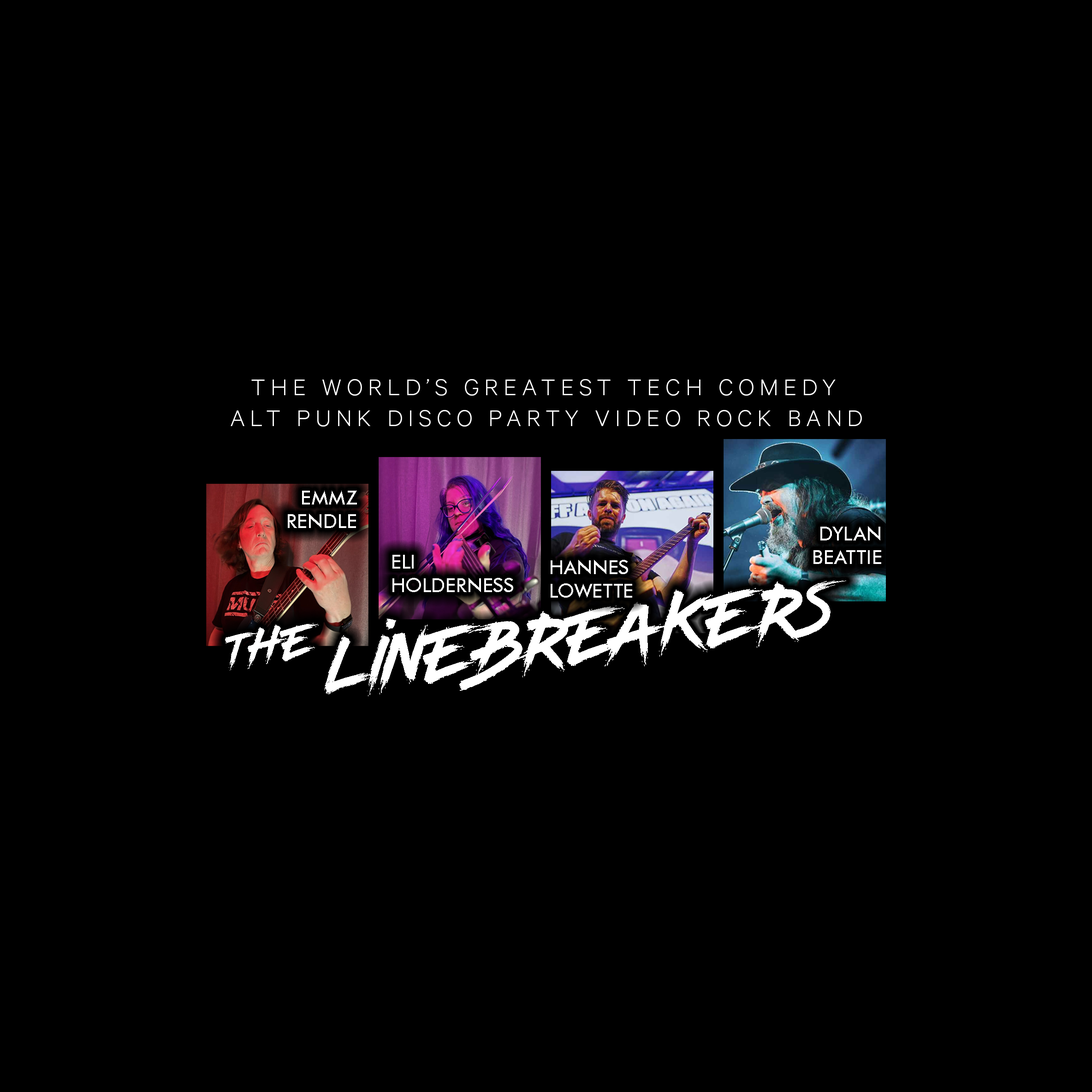
<style>
.page{position:relative;width:1092px;height:1092px;background:#000000}
.page>*{position:absolute;margin:0}
.t1{font:25.8px "Calibre-Light";letter-spacing:0.2em;color:#ffffff}
.t2{font:19.4px "FuturaBT-Medium";color:#ffffff}
.t3{font:72.4px "Kungfont-Regular";color:#ffffff}
.t4{font:45.7px "Kungfont-Regular";color:#ffffff}
</style>
<div class="page">
<p class="t1" style="left:231px;top:379px;width:631px;height:48px;text-align:center">THE WORLD’S GREATEST TECH COMEDY <br>ALT PUNK DISCO PARTY VIDEO ROCK BAND</p>
<p class="t2" style="left:288px;top:491px;width:69px;height:37px;text-align:right">EMMZ <br>RENDLE</p>
<p class="t2" style="left:813px;top:526px;width:68px;height:38px;text-align:right">DYLAN<br>BEATTIE</p>
<p class="t2" style="left:392px;top:555px;width:121px;height:37px">ELI<br>HOLDERNESS</p>
<p class="t2" style="left:551px;top:560px;width:81px;height:38px">HANNES<br>LOWETTE</p>
<p class="t3" style="left:225px;top:581px;width:621px;height:115px;rotate:-7deg"><span class="t4">THE </span>LINEBREAKERS</p>
</div>
